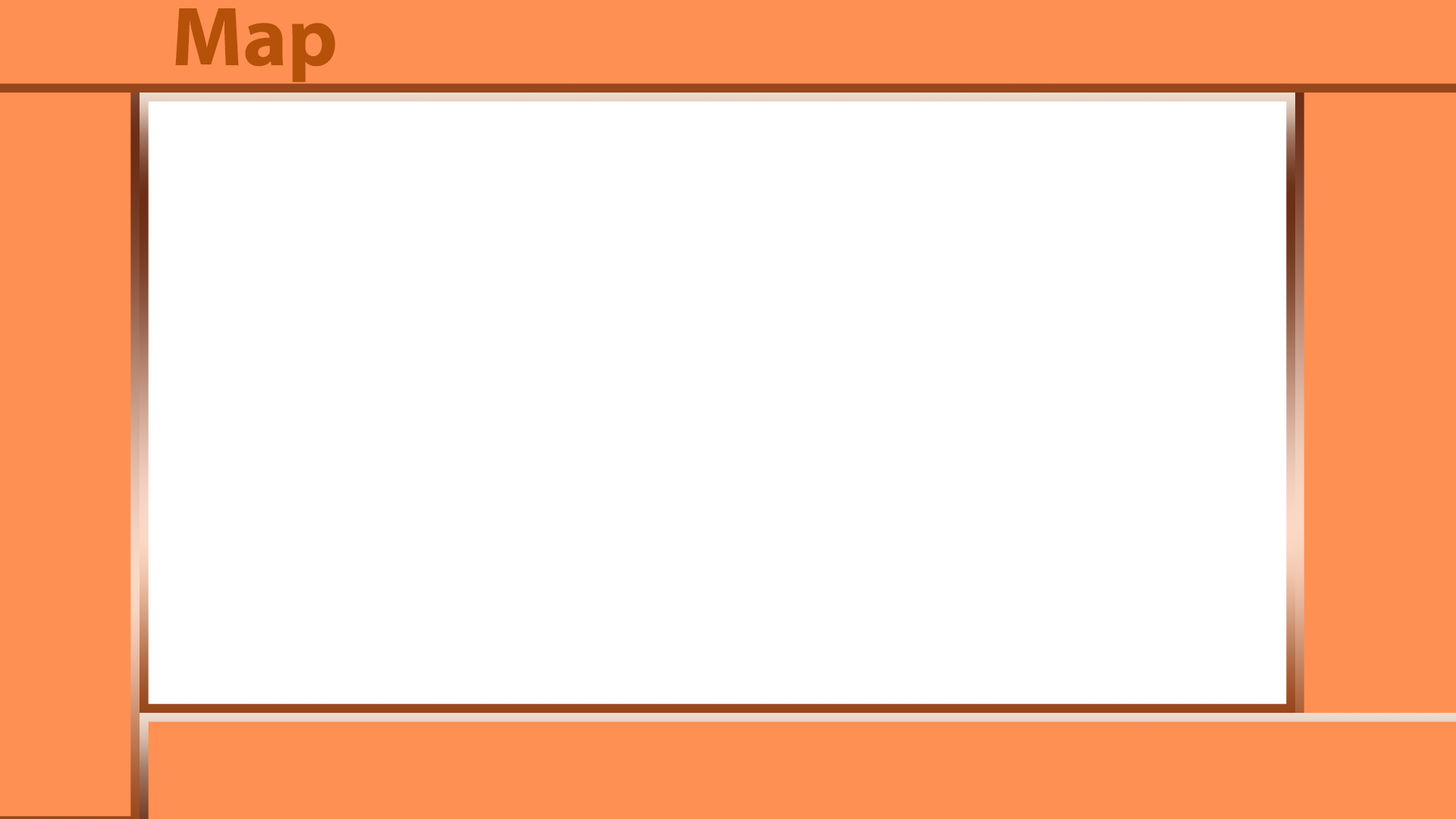
<style>
.page{position:relative;width:1456px;height:819px;background:#ffffff}
.page>*{position:absolute;margin:0}
.t1{font:84.3px "MyriadPro-Bold";color:#b55108}
</style>
<div class="page">
<p class="t1" style="left:175px;top:8px;width:160px;height:75px">Map</p>
</div>
